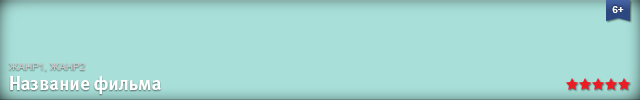
<style>
.page{position:relative;width:640px;height:100px;background:#a8e0d9}
.page>*{position:absolute;margin:0}
.t1{font:10px "Arial-BoldMT";color:#ffffff;text-transform:uppercase}
.t2{font:19px/20px "MetaBoldCyrLF-Roman";color:#ffffff}
.t3{font:10px/20px "ArialMT";color:#c8c8c8;text-transform:uppercase}
</style>
<div class="page">
<p class="t1" style="left:612px;top:6px;width:12px;height:7px">6+</p>
<p class="t2" style="left:9px;top:63px;width:152px;height:31px"><span class="t3">жанр1, жанр2<br></span>Название фильма</p>
</div>
